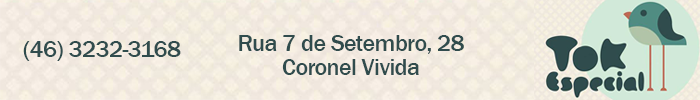
<style>
.page{position:relative;width:700px;height:100px}
.page>*{position:absolute;margin:0}
.t1{font:24px "FranklinGothic-Medium";letter-spacing:-0.025em;color:#304c4d}
.t2{font:24px/24px "FranklinGothic-Medium";letter-spacing:-0.025em;color:#304c4d}
</style>
<div class="page">
<p class="t1" style="left:23px;top:41px;width:158px;height:20px">(46) 3232-3168</p>
<p class="t2" style="left:239px;top:35px;width:225px;height:40px;text-align:center">Rua 7 de Setembro, 28<br>Coronel Vivida</p>
</div>
